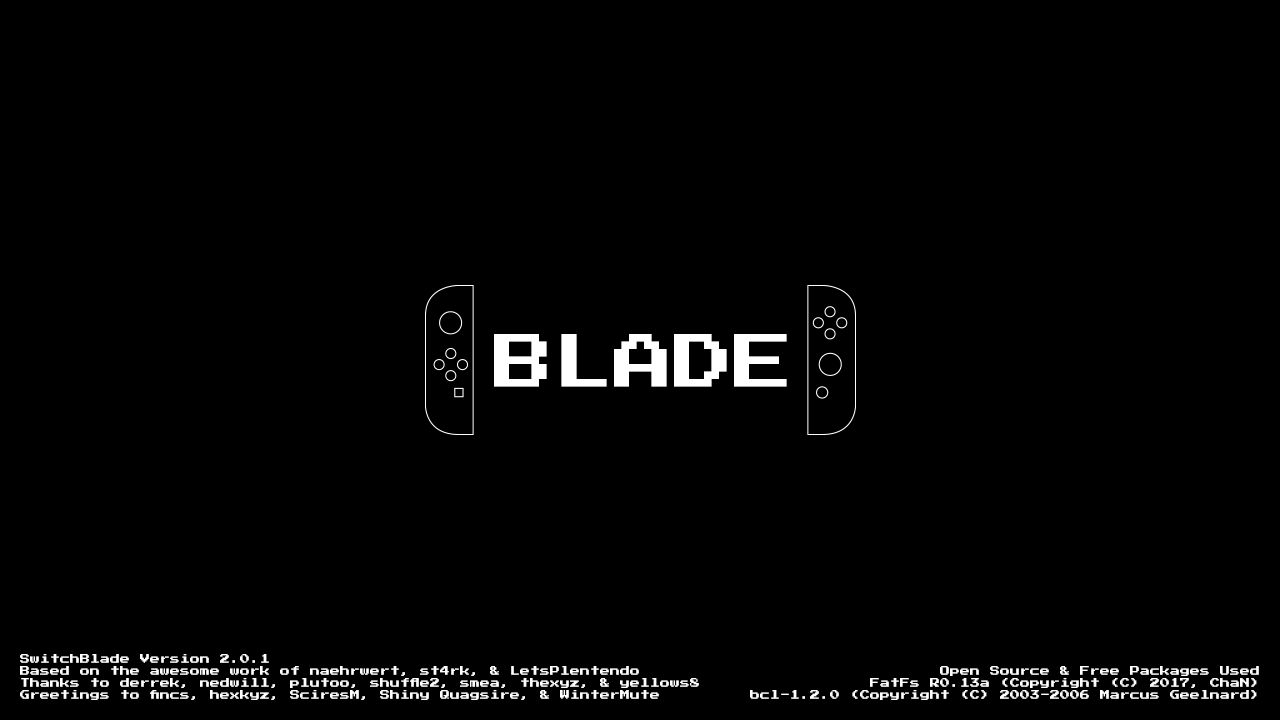
<style>
.page{position:relative;width:1280px;height:720px;background:#000000}
.page>*{position:absolute;margin:0}
.t1{font:60px "PressStart2P-Regular";color:#ffffff}
.t2{font:10px "PressStart2P-Regular";color:#ffffff}
</style>
<div class="page">
<p class="t1" style="left:494px;top:334px;width:293px;height:53px">BLADE</p>
<p class="t2" style="left:20px;top:654px;width:679px;height:46px">SwitchBlade Version 2.0.1<br>Based on the awesome work of naehrwert, st4rk, &amp; LetsPlentendo<br>Thanks to derrek, nedwill, plutoo, shuffle2, smea, thexyz, &amp; yellows8<br>Greetings to fincs, hexkyz, SciresM, Shiny Quagsire, &amp; WinterMute</p>
<p class="t2" style="left:750px;top:666px;width:509px;height:34px;text-align:right">Open Source &amp; Free Packages Used<br>FatFs R0.13a (Copyright (C) 2017, ChaN)<br>bcl-1.2.0 (Copyright (C) 2003-2006 Marcus Geelnard)</p>
</div>
